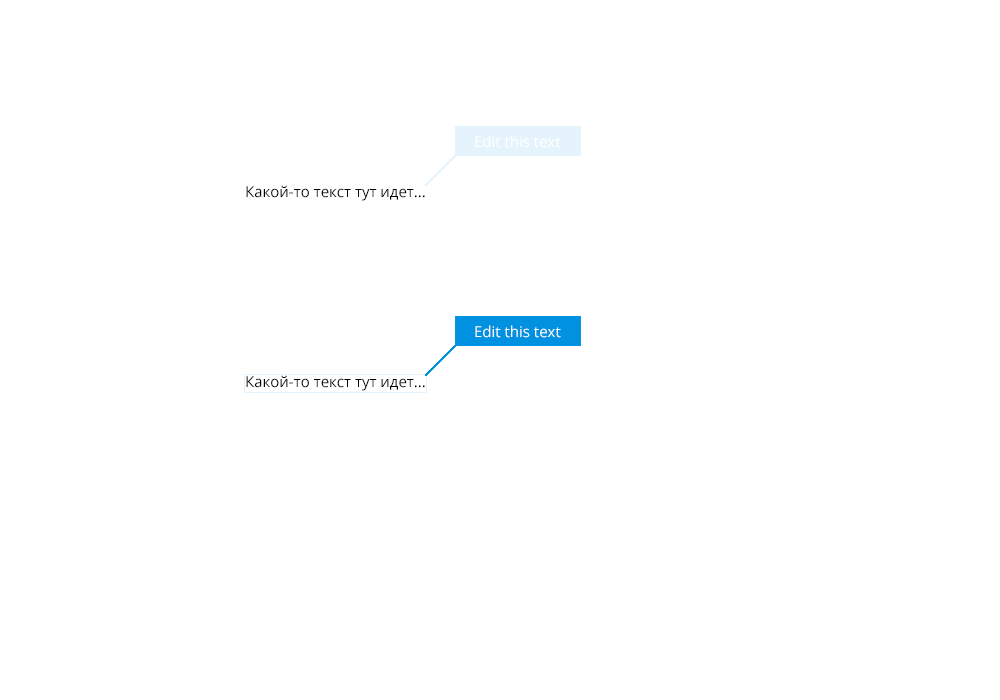
<style>
.page{position:relative;width:1000px;height:700px;background:#ffffff}
.page>*{position:absolute;margin:0}
.t1{font:15px "OpenSans";color:#ffffff}
.t2{font:15px "OpenSans";color:#000000}
</style>
<div class="page">
<p class="t1" style="left:475px;top:135px;width:86px;height:13px">Edit this text</p>
<p class="t2" style="left:246px;top:185px;width:179px;height:16px">Какой-то текст тут идет...</p>
<p class="t1" style="left:475px;top:325px;width:86px;height:13px">Edit this text</p>
<p class="t2" style="left:246px;top:375px;width:179px;height:16px">Какой-то текст тут идет...</p>
</div>
